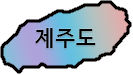
<style>
.page{position:relative;width:133px;height:75px;background:#ffffff}
.page>*{position:absolute;margin:0}
.t1{font:22px "HancomGothicBold";color:#000000}
</style>
<div class="page">
<p class="t1" style="left:35px;top:28px;width:61px;height:20px">제주도</p>
</div>
